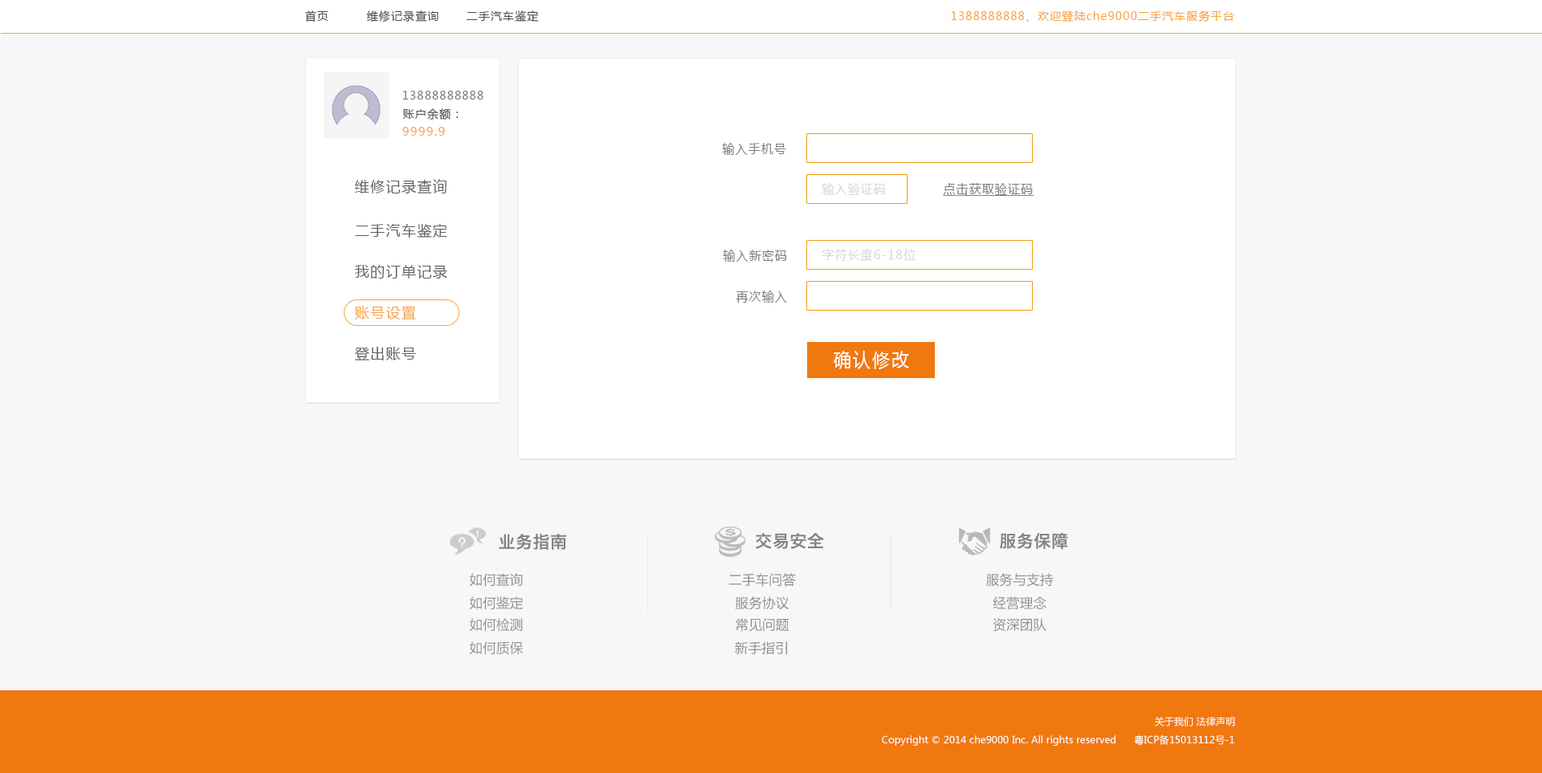
<style>
.page{position:relative;width:1542px;height:773px;background:#f7f7f7}
.page>*{position:absolute;margin:0}
.t1{font:11.2px "MicrosoftYaHei";letter-spacing:0.08em;color:#494949}
.t2{font:11.2px "MicrosoftYaHei";letter-spacing:0.08em;color:#f7a13c}
.t3{font:11.2px "MicrosoftYaHei";letter-spacing:0.08em;color:#787373}
.t4{font:12px "MicrosoftYaHei";letter-spacing:0.08em;color:#f7a13c}
.t5{font:12.8px "MicrosoftYaHei";letter-spacing:0.08em;color:#7c7c7c;scale:0.93 1}
.t6{font:14.5px "MicrosoftYaHei";letter-spacing:0.08em;color:#606060}
.t7{font:12.8px "MicrosoftYaHei";letter-spacing:0.08em;color:#d8d7d7;scale:0.93 1}
.t8{font:12.8px "MicrosoftYaHei";letter-spacing:0.08em;color:#7c7c7c;text-decoration:underline;scale:0.93 1}
.t9{font:12.8px "MicrosoftYaHei";letter-spacing:0.08em;color:#d7d7d7;scale:0.93 1}
.t10{font:14.5px "MicrosoftYaHei";letter-spacing:0.08em;color:#f7a13c}
.t11{font:19.3px "MicrosoftYaHei";letter-spacing:0.08em;color:#ffffff;scale:0.93 1}
.t12{font:17.1px "HiraginoSansGB-W6";letter-spacing:0.01em;color:#838383}
.t13{font:13.3px "MicrosoftYaHei";letter-spacing:0.01em;color:#909090}
.t14{font:9.6px "MicrosoftYaHei";letter-spacing:0.01em;color:#ffffff}
</style>
<div class="page">
<p class="t1" style="left:305px;top:10px;width:23px;height:12px">首页</p>
<p class="t1" style="left:366px;top:10px;width:72px;height:12px">维修记录查询</p>
<p class="t1" style="left:467px;top:10px;width:71px;height:12px">二手汽车鉴定</p>
<p class="t2" style="left:951px;top:10px;width:283px;height:12px">1388888888、欢迎登陆che9000二手汽车服务平台</p>
<p class="t3" style="left:402px;top:91px;width:81px;height:9px">13888888888</p>
<p class="t1" style="left:402px;top:108px;width:57px;height:12px">账户余额：</p>
<p class="t4" style="left:402px;top:127px;width:43px;height:9px">9999.9</p>
<p class="t5" style="left:722px;top:143px;width:64px;height:12px">输入手机号</p>
<p class="t6" style="left:355px;top:179px;width:92px;height:15px">维修记录查询</p>
<p class="t7" style="left:822px;top:183px;width:64px;height:12px">输入验证码</p>
<p class="t8" style="left:943px;top:183px;width:91px;height:14px">点击获取验证码</p>
<p class="t6" style="left:355px;top:223px;width:92px;height:15px">二手汽车鉴定</p>
<p class="t5" style="left:723px;top:250px;width:64px;height:12px">输入新密码</p>
<p class="t9" style="left:822px;top:248px;width:94px;height:14px">字符长度6-18位</p>
<p class="t6" style="left:354px;top:265px;width:93px;height:14px">我的订单记录</p>
<p class="t5" style="left:736px;top:291px;width:51px;height:12px">再次输入</p>
<p class="t10" style="left:355px;top:306px;width:61px;height:14px">账号设置</p>
<p class="t6" style="left:355px;top:347px;width:61px;height:14px">登出账号</p>
<p class="t11" style="left:833px;top:351px;width:76px;height:18px">确认修改</p>
<p class="t12" style="left:756px;top:533px;width:68px;height:16px">交易安全</p>
<p class="t12" style="left:999px;top:532px;width:69px;height:18px">服务保障</p>
<p class="t12" style="left:499px;top:534px;width:67px;height:16px">业务指南</p>
<p class="t13" style="left:469px;top:573px;width:54px;height:14px">如何查询</p>
<p class="t13" style="left:728px;top:573px;width:68px;height:14px">二手车问答</p>
<p class="t13" style="left:986px;top:573px;width:68px;height:14px">服务与支持</p>
<p class="t13" style="left:469px;top:597px;width:54px;height:13px">如何鉴定</p>
<p class="t13" style="left:735px;top:597px;width:54px;height:13px">服务协议</p>
<p class="t13" style="left:993px;top:597px;width:53px;height:13px">经营理念</p>
<p class="t13" style="left:469px;top:618px;width:54px;height:14px">如何检测</p>
<p class="t13" style="left:736px;top:618px;width:53px;height:14px">常见问题</p>
<p class="t13" style="left:993px;top:618px;width:53px;height:14px">资深团队</p>
<p class="t13" style="left:469px;top:642px;width:54px;height:13px">如何质保</p>
<p class="t13" style="left:735px;top:642px;width:52px;height:13px">新手指引</p>
<p class="t14" style="left:1154px;top:717px;width:81px;height:10px">关于我们 法律声明</p>
<p class="t14" style="left:882px;top:735px;width:352px;height:11px">Copyright © 2014 che9000 Inc. All rights reserved      粤ICP备15013112号-1</p>
</div>
